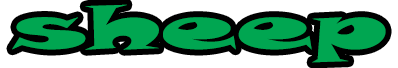
<style>
.page{position:relative;width:398px;height:68px;background:#ffffff}
.page>*{position:absolute;margin:0}
.t1{font:60px "SnapITC-Regular";color:#00a651;scale:2 1}
</style>
<div class="page">
<p class="t1" style="left:12px;top:4px;width:374px;height:59px">sheep</p>
</div>
